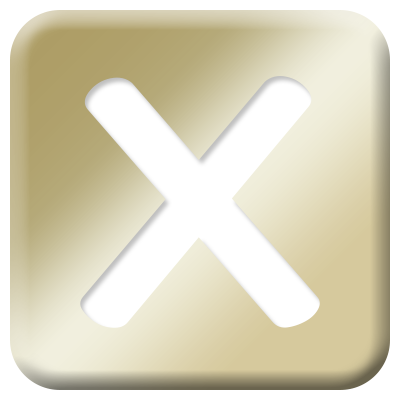
<style>
.page{position:relative;width:400px;height:400px;background:#ffffff}
.page>*{position:absolute;margin:0}
.t1{font:373.2px "KoreanAT-R";letter-spacing:-0.05em;color:#ffffff;scale:1.22 1}
</style>
<div class="page">
<p class="t1" style="left:80px;top:76px;width:240px;height:252px">X</p>
</div>
